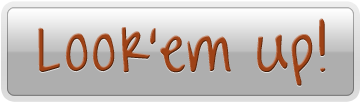
<style>
.page{position:relative;width:360px;height:102px;background:#aeaeae}
.page>*{position:absolute;margin:0}
.t1{font:63.4px "SharkintheWater-Bold";letter-spacing:0.05em;color:#9e4216}
</style>
<div class="page">
<p class="t1" style="left:38px;top:18px;width:288px;height:68px">Look’em up!</p>
</div>
